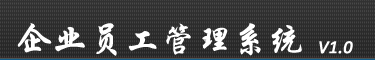
<style>
.page{position:relative;width:375px;height:60px}
.page>*{position:absolute;margin:0}
.t1{font:36px "STXingkai";color:#ffffff}
.t2{font:18px "Calibri-Italic";color:#ffffff;font-weight:bold}
</style>
<div class="page">
<p class="t1" style="left:17px;top:23px;width:285px;height:33px">企业员工管理系统</p>
<p class="t2" style="left:319px;top:41px;width:34px;height:13px">V1.0</p>
</div>
